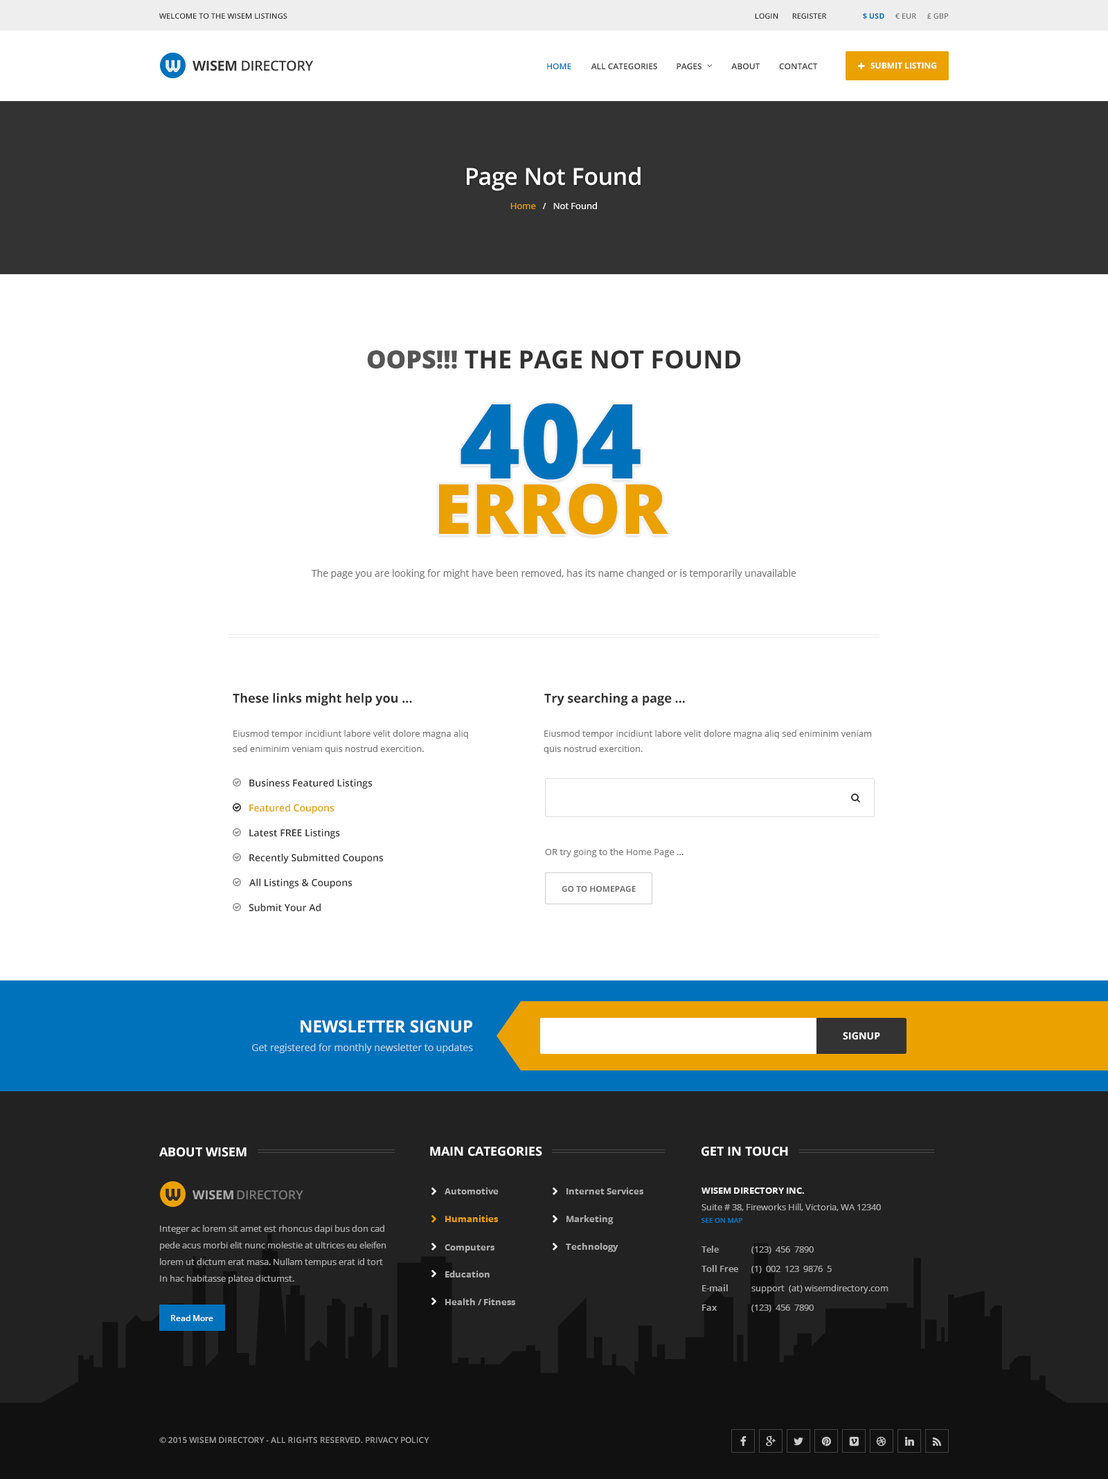
<style>
.page{position:relative;width:1108px;height:1479px;background:#ffffff}
.page>*{position:absolute;margin:0}
.t1{font:7.6px "OpenSans-Semibold";color:#333333;text-transform:uppercase}
.t2{font:7.6px "OpenSans-Bold";color:#0072bc;text-transform:uppercase}
.t3{font:7.6px "OpenSans-Semibold";color:#777777;text-transform:uppercase}
.t4{font:13.8px "OpenSans-Semibold";letter-spacing:-0.025em;color:#333333;text-transform:uppercase}
.t5{font:13.8px "OpenSans-Bold";letter-spacing:-0.025em;color:#333333;text-transform:uppercase}
.t6{font:8.3px "OpenSans-Semibold";color:#0072bc;text-transform:uppercase}
.t7{font:8.3px "OpenSans-Semibold";color:#333333;text-transform:uppercase}
.t8{font:8.3px "OpenSans-Bold";color:#ffffff;text-transform:uppercase}
.t9{font:23.5px "OpenSans-Semibold";color:#ffffff}
.t10{font:9px "OpenSans";color:#ffffff}
.t11{font:9px "OpenSans";color:#eba100}
.t12{font:24.9px "OpenSans-Bold";color:#333333;text-transform:uppercase}
.t13{font:24.9px "OpenSans-Extrabold";color:#555555;text-transform:uppercase}
.t14{font:69.2px/55.4px "OpenSans-Extrabold";color:#eba100;text-transform:uppercase}
.t15{font:103.8px/55.4px "OpenSans-Extrabold";color:#0072bc;text-transform:uppercase}
.t16{font:9.7px "OpenSans";color:#777777}
.t17{font:12.5px "OpenSans-Bold";color:#333333}
.t18{font:9px/15.2px "OpenSans";color:#777777}
.t19{font:9.7px "OpenSans-Semibold";color:#333333}
.t20{font:9.7px "OpenSans-Semibold";color:#eba100}
.t21{font:9px "OpenSans";color:#777777}
.t22{font:8.3px "OpenSans-Bold";letter-spacing:-0.01em;color:#777777;text-transform:uppercase}
.t23{font:16.6px "OpenSans-Bold";color:#ffffff;text-transform:uppercase}
.t24{font:9.7px "OpenSans-Bold";letter-spacing:0.01em;color:#ffffff;text-transform:uppercase}
.t25{font:9.7px "OpenSans";color:#b8cee6}
.t26{font:12.5px "OpenSans-Bold";color:#ffffff;text-transform:uppercase}
.t27{font:12.5px "OpenSans-Bold";color:#ffffff}
.t28{font:12.5px "OpenSans-Bold";color:#aaaaaa;text-transform:uppercase}
.t29{font:12.5px "OpenSans-Semibold";letter-spacing:-0.01em;color:#777777;text-transform:uppercase}
.t30{font:9px "OpenSans-Bold";color:#aaaaaa}
.t31{font:9px/16.6px "OpenSans";color:#aaaaaa}
.t32{font:9px/16.6px "OpenSans-Bold";color:#eeeeee}
.t33{font:9px "OpenSans-Bold";color:#eba100}
.t34{font:6.9px "OpenSans-Semibold";color:#0072bc;text-transform:uppercase}
.t35{font:9px/19.4px "OpenSans-Semibold";color:#aaaaaa}
.t36{font:9px/19.4px "OpenSans";color:#aaaaaa}
.t37{font:8.3px "OpenSans-Semibold";color:#ffffff}
.t38{font:8.3px "OpenSans-Semibold";letter-spacing:-0.01em;color:#999999;text-transform:uppercase}
</style>
<div class="page">
<p class="t1" style="left:159px;top:13px;width:128px;height:6px">Welcome to the Wisem listings</p>
<p class="t1" style="left:755px;top:13px;width:23px;height:6px">LOGIN</p>
<p class="t1" style="left:792px;top:13px;width:35px;height:6px">register</p>
<p class="t2" style="left:863px;top:12px;width:21px;height:7px">$ USD</p>
<p class="t3" style="left:895px;top:13px;width:21px;height:6px">€ EUR</p>
<p class="t3" style="left:927px;top:13px;width:21px;height:6px">£ GBP</p>
<p class="t4" style="left:192px;top:60px;width:122px;height:11px"><span class="t5">wisem</span> directory</p>
<p class="t6" style="left:547px;top:63px;width:24px;height:6px">HOME</p>
<p class="t7" style="left:591px;top:63px;width:66px;height:6px">All categories</p>
<p class="t7" style="left:676px;top:63px;width:25px;height:6px">Pages</p>
<p class="t7" style="left:731px;top:63px;width:28px;height:6px">About</p>
<p class="t7" style="left:779px;top:63px;width:39px;height:6px">Contact</p>
<p class="t8" style="left:870px;top:62px;width:66px;height:7px">Submit Listing</p>
<p class="t9" style="left:467px;top:167px;width:173px;height:24px">Page Not Found</p>
<p class="t10" style="left:510px;top:202px;width:87px;height:7px"><span class="t11">Home</span>   /   Not Found</p>
<p class="t12" style="left:367px;top:350px;width:374px;height:19px"><span class="t13">OOps!!! </span>The Page Not found</p>
<p class="t14" style="left:439px;top:403px;width:229px;height:131px;text-align:center"><span class="t15">404<br></span>error</p>
<p class="t16" style="left:311px;top:569px;width:485px;height:10px">The page you are looking for might have been removed, has its name changed or is temporarily unavailable</p>
<p class="t17" style="left:233px;top:693px;width:179px;height:12px">These links might help you ...</p>
<p class="t17" style="left:544px;top:693px;width:141px;height:12px">Try searching a page ...</p>
<p class="t18" style="left:233px;top:730px;width:235px;height:24px">Eiusmod tempor incidiunt labore velit dolore magna aliq<br>sed eniminim veniam quis nostrud exercition.</p>
<p class="t18" style="left:543px;top:730px;width:329px;height:24px">Eiusmod tempor incidiunt labore velit dolore magna aliq sed eniminim veniam<br>quis nostrud exercition.</p>
<p class="t19" style="left:249px;top:779px;width:123px;height:10px">Business Featured Listings</p>
<p class="t20" style="left:249px;top:804px;width:85px;height:9px">Featured Coupons</p>
<p class="t19" style="left:249px;top:829px;width:91px;height:9px">Latest FREE Listings</p>
<p class="t19" style="left:249px;top:854px;width:135px;height:9px">Recently Submitted Coupons</p>
<p class="t21" style="left:545px;top:848px;width:138px;height:9px">OR try going to the Home Page ...</p>
<p class="t19" style="left:249px;top:879px;width:103px;height:9px">All Listings &amp; Coupons</p>
<p class="t22" style="left:561px;top:885px;width:75px;height:7px">go to homepage</p>
<p class="t19" style="left:249px;top:903px;width:72px;height:8px">Submit Your Ad</p>
<p class="t23" style="left:300px;top:1020px;width:172px;height:13px">Newsletter signup</p>
<p class="t24" style="left:843px;top:1032px;width:37px;height:8px">Signup</p>
<p class="t25" style="left:252px;top:1043px;width:221px;height:10px">Get registered for monthly newsletter to updates</p>
<p class="t26" style="left:159px;top:1147px;width:87px;height:10px">About wisem</p>
<p class="t26" style="left:430px;top:1146px;width:112px;height:10px">main categories</p>
<p class="t27" style="left:701px;top:1146px;width:87px;height:10px">GET IN TOUCH</p>
<p class="t28" style="left:192px;top:1190px;width:41px;height:10px">wisem</p>
<p class="t29" style="left:237px;top:1190px;width:66px;height:10px">directory</p>
<p class="t30" style="left:444px;top:1187px;width:54px;height:7px">Automotive</p>
<p class="t30" style="left:566px;top:1187px;width:78px;height:7px">Internet Services</p>
<p class="t31" style="left:701px;top:1187px;width:180px;height:24px"><span class="t32">WISEM DIRECTORY INC.<br></span>Suite # 38, Fireworks Hill, Victoria, WA 12340</p>
<p class="t33" style="left:445px;top:1215px;width:53px;height:7px">Humanities</p>
<p class="t30" style="left:566px;top:1215px;width:47px;height:9px">Marketing</p>
<p class="t34" style="left:701px;top:1218px;width:41px;height:5px">see on map</p>
<p class="t31" style="left:160px;top:1225px;width:226px;height:59px">Integer ac lorem sit amet est rhoncus dapi bus don cad<br>pede acus morbi elit nunc molestie at ultrices eu eleifen<br>lorem ut dictum erat masa. Nullam tempus erat id tort<br>In hac habitasse platea dictumst.</p>
<p class="t30" style="left:444px;top:1244px;width:51px;height:8px">Computers</p>
<p class="t30" style="left:566px;top:1243px;width:52px;height:9px">Technology</p>
<p class="t35" style="left:701px;top:1245px;width:37px;height:66px">Tele<br>Toll Free<br>E-mail<br>Fax</p>
<p class="t36" style="left:751px;top:1246px;width:137px;height:66px">(123)  456  7890<br>(1)  002  123  9876  5<br>support  (at) wisemdirectory.com<br>(123)  456  7890</p>
<p class="t30" style="left:445px;top:1270px;width:44px;height:7px">Education</p>
<p class="t30" style="left:445px;top:1298px;width:71px;height:7px">Health / Fitness</p>
<p class="t37" style="left:171px;top:1315px;width:42px;height:6px">Read More</p>
<p class="t38" style="left:159px;top:1437px;width:204px;height:6px">© 2015 Wisem Directory - All Rights Reserved.</p>
<p class="t38" style="left:366px;top:1437px;width:63px;height:6px">Privacy Policy</p>
</div>
